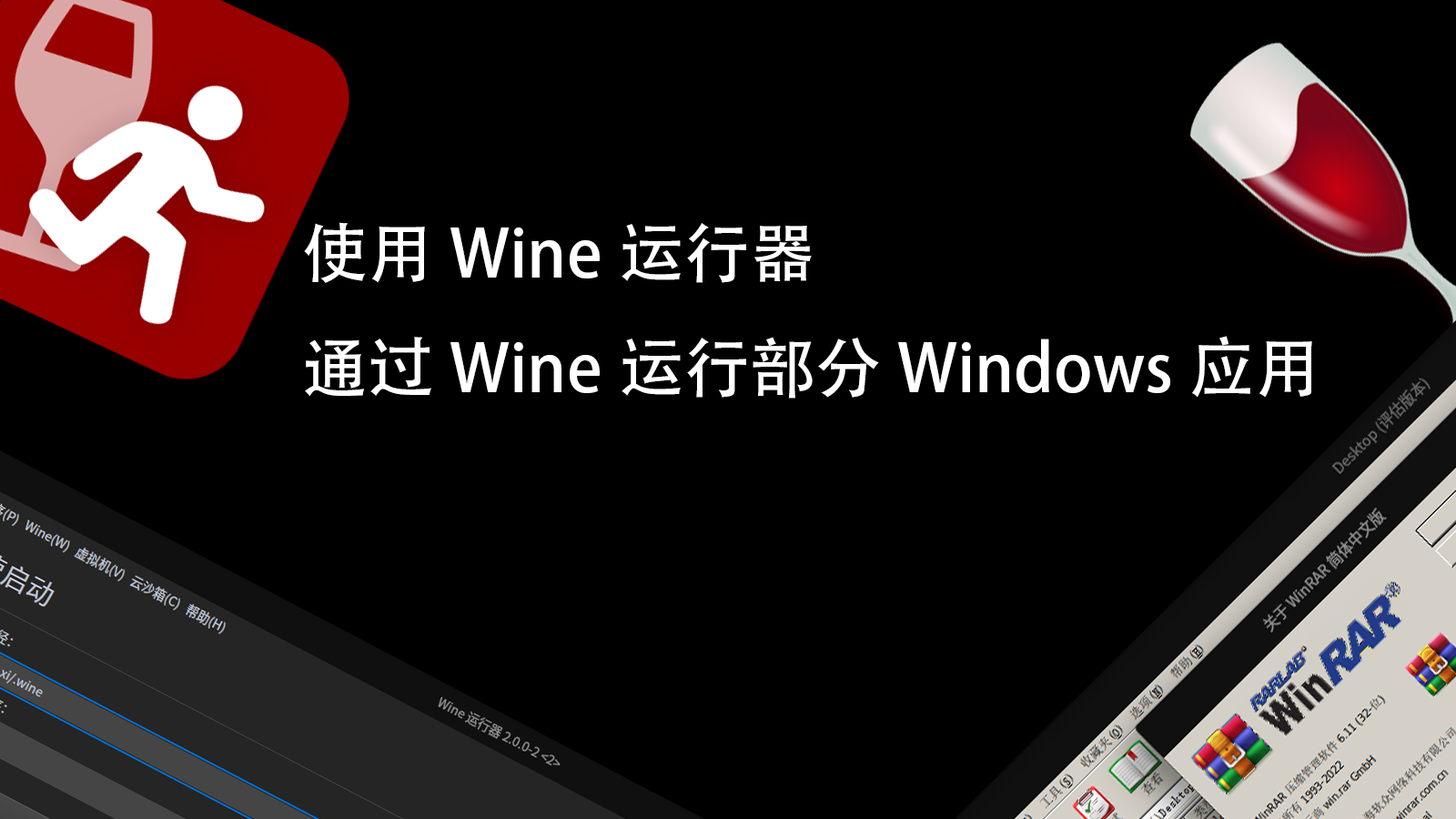
<style>
.page{position:relative;width:1456px;height:819px;background:#000000}
.page>*{position:absolute;margin:0}
.t1{font:65.5px "AdobeHeitiStd-Regular";color:#ffffff}
</style>
<div class="page">
<p class="t1" style="left:304px;top:222px;width:1008px;height:177px">使用Wine运行器<br>通过Wine运行部分Windows应用</p>
</div>
